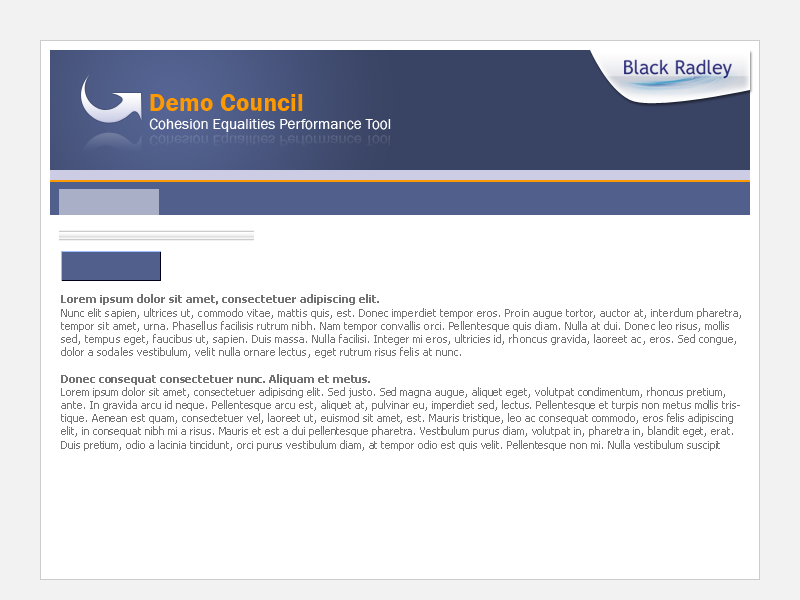
<style>
.page{position:relative;width:800px;height:600px;background:#ffffff}
.page>*{position:absolute;margin:0}
.t1{font:15.2px "FranklinGothic-Book";color:#ffffff}
.t2{font:25.4px "FranklinGothic-Demi";color:#ff9900}
.t3{font:11px "Tahoma";color:#737373}
.t4{font:11px "Tahoma-Bold";color:#737373}
</style>
<div class="page">
<p class="t1" style="left:149px;top:94px;width:242px;height:38px"><span class="t2">Demo Council<br></span>Cohesion Equalities Performance Tool</p>
<p class="t3" style="left:61px;top:294px;width:680px;height:157px"><span class="t4">Lorem ipsum dolor sit amet, consectetuer adipiscing elit.</span> <br>Nunc elit sapien, ultrices ut, commodo vitae, mattis quis, est. Donec imperdiet tempor eros. Proin augue tortor, auctor at, interdum pharetra, tempor sit amet, urna. Phasellus facilisis rutrum nibh. Nam tempor convallis orci. Pellentesque quis diam. Nulla at dui. Donec leo risus, mollis sed, tempus eget, faucibus ut, sapien. Duis massa. Nulla facilisi. Integer mi eros, ultricies id, rhoncus gravida, laoreet ac, eros. Sed congue, dolor a sodales vestibulum, velit nulla ornare lectus, eget rutrum risus felis at nunc. <br><br><span class="t4">Donec consequat consectetuer nunc. Aliquam et metus.</span> <br>Lorem ipsum dolor sit amet, consectetuer adipiscing elit. Sed justo. Sed magna augue, aliquet eget, volutpat condimentum, rhoncus pretium, ante. In gravida arcu id neque. Pellentesque arcu est, aliquet at, pulvinar eu, imperdiet sed, lectus. Pellentesque et turpis non metus mollis tristique. Aenean est quam, consectetuer vel, laoreet ut, euismod sit amet, est. Mauris tristique, leo ac consequat commodo, eros felis adipiscing elit, in consequat nibh mi a risus. Mauris et est a dui pellentesque pharetra. Vestibulum purus diam, volutpat in, pharetra in, blandit eget, erat. Duis pretium, odio a lacinia tincidunt, orci purus vestibulum diam, at tempor odio est quis velit. Pellentesque non mi. Nulla vestibulum suscipit sapien. In id ipsum a orci commodo interdum. Vivamus velit arcu, ullamcorper ut, molestie at, consequat tristique, sem. <br><br>Integer a turpis ac neque fermentum bibendum. Class aptent taciti sociosqu ad litora torquent per conubia nostra, per inceptos hymenaeos. Nunc nisl. Aenean nunc. Nunc eleifend odio vel mi. Cras facilisis, ante accumsan condimentum vulputate, nisl turpis rhoncus leo, ut sodales nisi magna id ligula. Vivamus arcu erat, feugiat vitae, fringilla nec, tincidunt quis, augue. Etiam diam. Quisque ultrices. Sed rhoncus mauris. Nunc egestas viverra nibh. Sed vehicula. Proin hendrerit. Nullam tincidunt sagittis lectus. Nam eu ligula. Nullam eros risus, gravida eget, lobortis porta, ornare euismod, augue. Aenean rutrum nulla in felis.</p>
</div>
